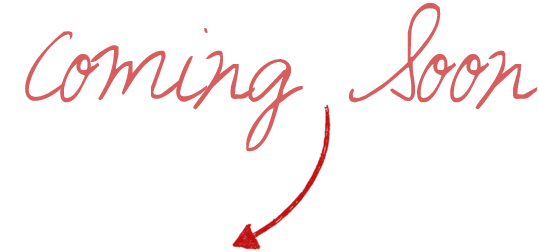
<style>
.page{position:relative;width:539px;height:252px;background:#ffffff}
.page>*{position:absolute;margin:0}
.t1{font:93px "SunshineInMySoul";color:#d65e5e;scale:0.88 1}
</style>
<div class="page">
<p class="t1" style="left:25px;top:2px;width:513px;height:150px">Coming Soon</p>
</div>
